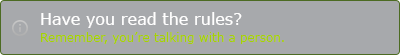
<style>
.page{position:relative;width:400px;height:55px;background:#a7a9ac}
.page>*{position:absolute;margin:0}
.t1{font:16px "Verdana";color:#ffffff}
.t2{font:12px "Verdana";color:#a4d007}
</style>
<div class="page">
<p class="t1" style="left:41px;top:12px;width:201px;height:16px">Have you read the rules?</p>
<p class="t2" style="left:41px;top:32px;width:243px;height:12px">Remember, you’re talking with a person.</p>
</div>
